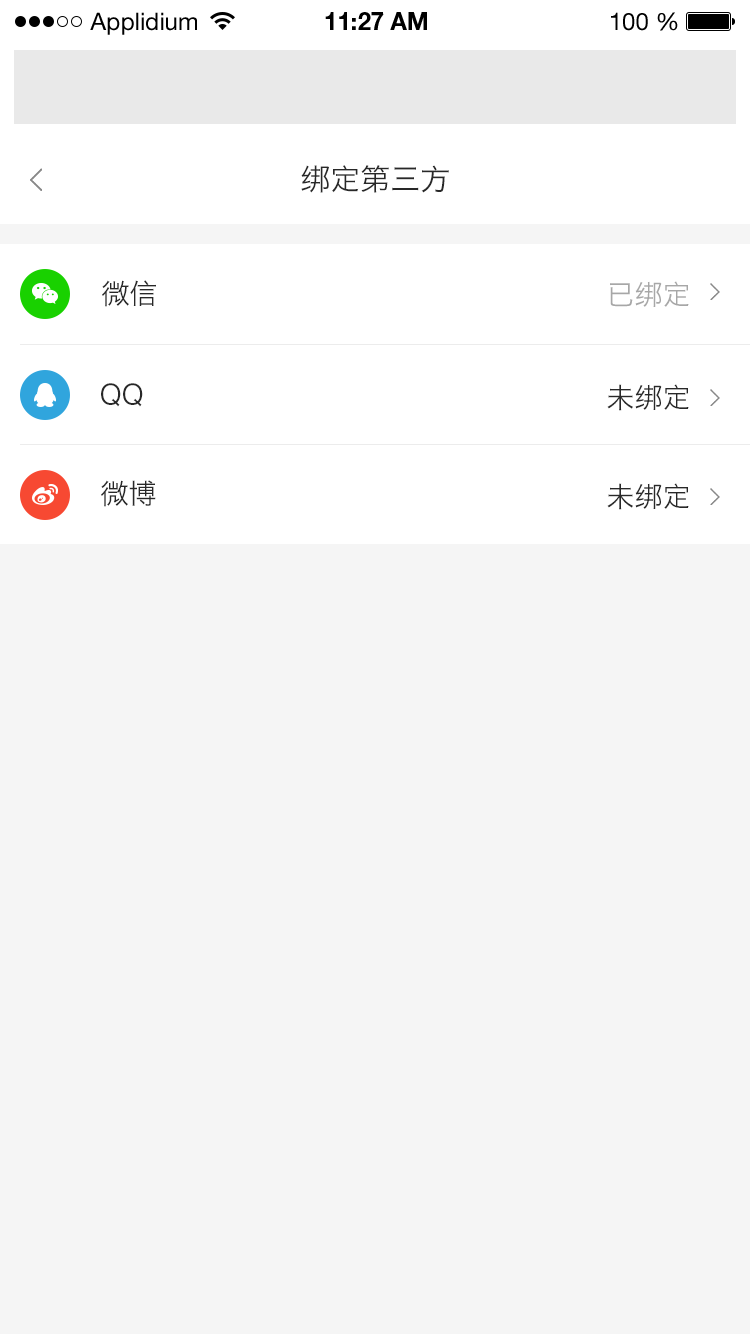
<style>
.page{position:relative;width:750px;height:1334px;background:#f5f5f5}
.page>*{position:absolute;margin:0}
.t1{font:24px "HelveticaNeueLTStd-Roman";color:#000000}
.t2{font:24px "HelveticaNeueLTStd-Bd";color:#000000}
.t3{font:30px "HiraginoSansGB-W3";color:#282828}
.t4{font:28px "HiraginoSansGB-W3";color:#282828}
.t5{font:28px "HiraginoSansGB-W3";color:#a7a7a7}
</style>
<div class="page">
<p class="t1" style="left:90px;top:12px;width:107px;height:23px">Applidium</p>
<p class="t2" style="left:325px;top:12px;width:102px;height:18px">11:27 AM</p>
<p class="t1" style="left:611px;top:12px;width:67px;height:19px">100 %</p>
<p class="t3" style="left:301px;top:165px;width:148px;height:28px">绑定第三方</p>
<p class="t4" style="left:102px;top:280px;width:54px;height:27px">微信</p>
<p class="t5" style="left:610px;top:281px;width:79px;height:26px">已绑定</p>
<p class="t4" style="left:101px;top:383px;width:42px;height:24px">QQ</p>
<p class="t4" style="left:607px;top:384px;width:82px;height:27px">未绑定</p>
<p class="t4" style="left:101px;top:480px;width:55px;height:27px">微博</p>
<p class="t4" style="left:607px;top:483px;width:82px;height:27px">未绑定</p>
</div>
